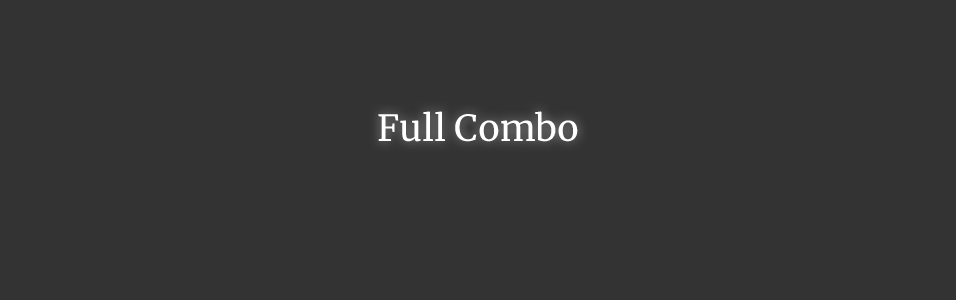
<style>
.page{position:relative;width:956px;height:300px;background:#333333}
.page>*{position:absolute;margin:0}
.t1{font:36px "Merriweather-Regular";color:#ffffff}
</style>
<div class="page">
<p class="t1" style="left:378px;top:111px;width:200px;height:31px">Full Combo</p>
</div>
